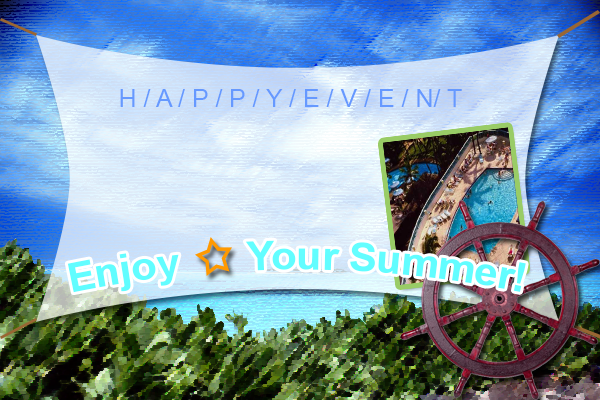
<style>
.page{position:relative;width:600px;height:400px}
.page>*{position:absolute;margin:0}
.t1{font:25px "ArialMT";color:#6699ff}
.t2{font:40px "Arial-BoldMT";color:#66ffff}
</style>
<div class="page">
<p class="t1" style="left:120px;top:89px;width:342px;height:18px">H / A / P / P / Y / E / V / E / N/ T</p>
<p class="t2" style="left:67px;top:240px;width:459px;height:53px">Enjoy      Your Summer!</p>
</div>
